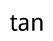
<style>
.page{position:relative;width:53px;height:41px;background:#ffffff}
.page>*{position:absolute;margin:0}
.t1{font:23.7px "DroidSans";color:#000000}
</style>
<div class="page">
<p class="t1" style="left:10px;top:15px;width:33px;height:16px">tan</p>
</div>
